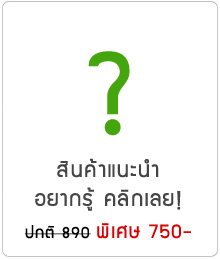
<style>
.page{position:relative;width:220px;height:259px;background:#ffffff}
.page>*{position:absolute;margin:0}
.t1{font:133.2px "supermarket";letter-spacing:0.05em;color:#45a50c}
.t2{font:24px "supermarket";letter-spacing:0.05em;color:#454545}
.t3{font:22px "supermarket";letter-spacing:0.05em;color:#d80003}
.t4{font:18px "supermarket";letter-spacing:0.05em;color:#000000}
</style>
<div class="page">
<p class="t1" style="left:88px;top:51px;width:42px;height:85px">?</p>
<p class="t2" style="left:35px;top:158px;width:146px;height:53px;text-align:center">สินค้าแนะนำ<br>อยากรู้ คลิกเลย!</p>
<p class="t3" style="left:25px;top:223px;width:166px;height:16px"><span class="t4">ปกติ 890 </span>พิเศษ 750-</p>
</div>
